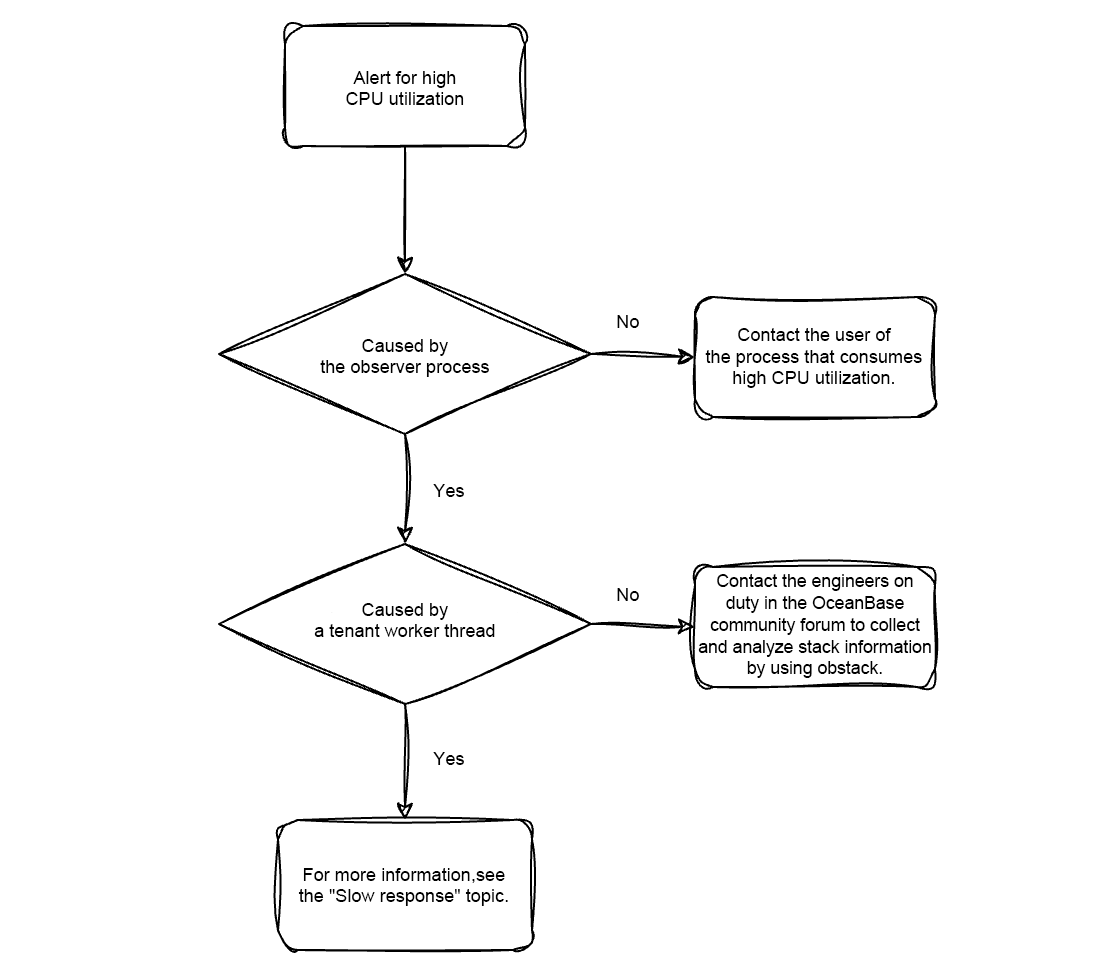
<style>
.page{position:relative;width:1120px;height:978px;background:#ffffff}
.page>*{position:absolute;margin:0}
.t1{font:18.1px/21.8px "ArialMT";color:#000000}
.t2{font:18.1px "ArialMT";color:#000000}
</style>
<div class="page">
<p class="t1" style="left:346px;top:71px;width:118px;height:34px;text-align:center">Alert for high<br>CPU utilization</p>
<p class="t2" style="left:617px;top:315px;width:22px;height:13px">No</p>
<p class="t1" style="left:705px;top:328px;width:217px;height:60px;text-align:center">Contact the user of<br>the process that consumes<br>high CPU utilization.</p>
<p class="t1" style="left:320px;top:339px;width:169px;height:38px;text-align:center">Caused by<br>the observer process</p>
<p class="t2" style="left:433px;top:484px;width:31px;height:13px">Yes</p>
<p class="t1" style="left:698px;top:574px;width:233px;height:104px;text-align:center">Contact the engineers on duty in the OceanBase community forum to collect and analyze stack information by using obstack.</p>
<p class="t2" style="left:617px;top:588px;width:22px;height:13px">No</p>
<p class="t1" style="left:314px;top:603px;width:181px;height:34px;text-align:center">Caused by<br>a tenant worker thread</p>
<p class="t2" style="left:433px;top:752px;width:31px;height:13px">Yes</p>
<p class="t1" style="left:298px;top:868px;width:210px;height:38px;text-align:center">For more information,see<br>the "Slow response" topic.</p>
</div>
